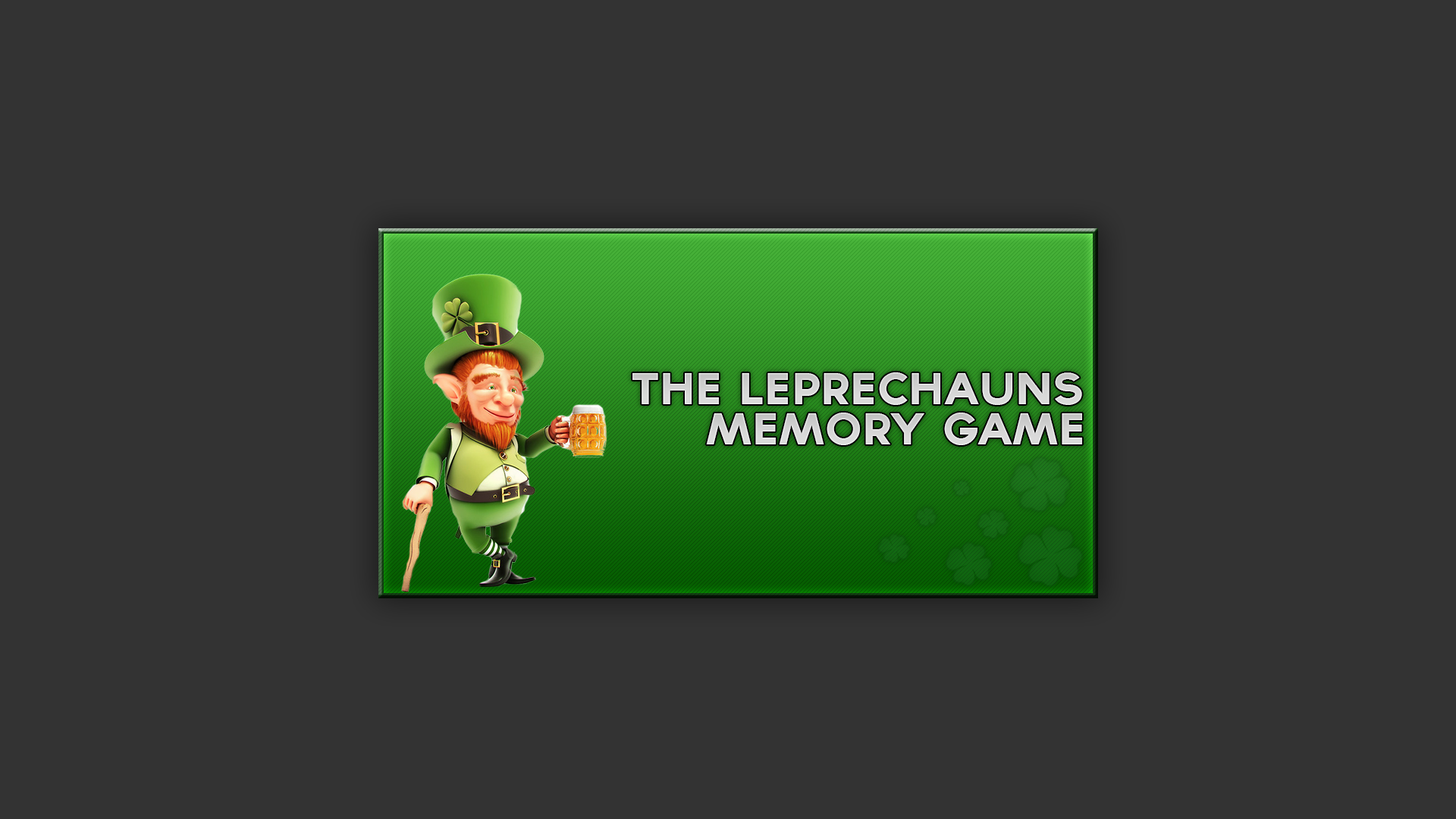
<style>
.page{position:relative;width:1456px;height:819px;background:#333333}
.page>*{position:absolute;margin:0}
.t1{font:40.1px "TYPOGRAPHPRO-ExtraBold";letter-spacing:0.01em;color:#dadada}
</style>
<div class="page">
<p class="t1" style="left:632px;top:372px;width:450px;height:33px">The Leprechauns</p>
<p class="t1" style="left:706px;top:413px;width:376px;height:32px">Memory Game</p>
</div>
